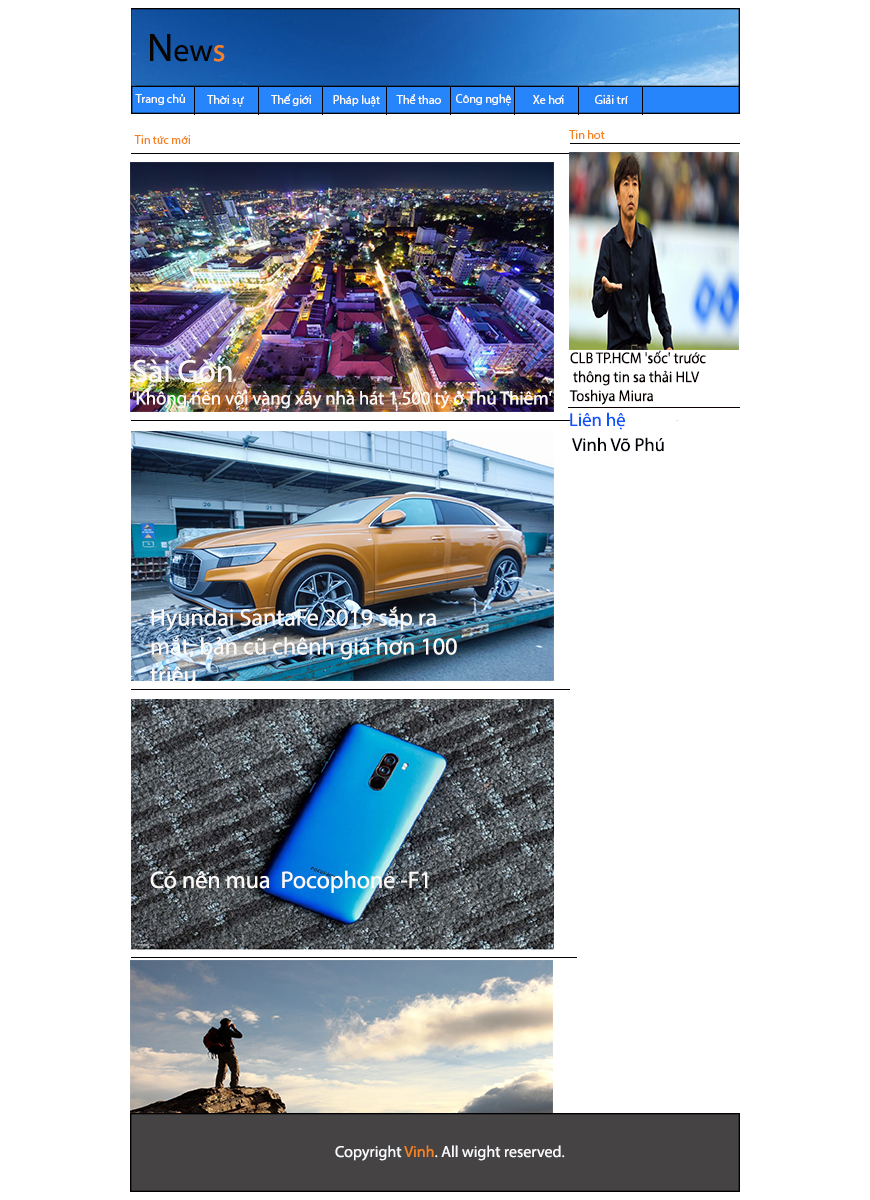
<style>
.page{position:relative;width:870px;height:1200px;background:#ffffff}
.page>*{position:absolute;margin:0}
.t1{font:32px "MyriadPro-Regular";color:#080400}
.t2{font:40px "MyriadPro-Regular";color:#080400}
.t3{font:32px "MyriadPro-Regular";color:#f58220}
.t4{font:12px "MyriadPro-Regular";color:#f9f8f8}
.t5{font:12px "MyriadPro-Regular";color:#f58220}
.t6{font:15.8px "MyriadPro-Regular";color:#0a0000;scale:0.93 1}
.t7{font:18.7px "MyriadPro-Regular";color:#fbf8f6}
.t8{font:32.1px "MyriadPro-Regular";color:#fbf8f6}
.t9{font:18.7px "MyriadPro-Regular";color:#0d55fa}
.t10{font:18.7px "MyriadPro-Regular";color:#00030a}
.t11{font:24px "MyriadPro-Regular";color:#fbf8f6}
.t12{font:16px "MyriadPro-Regular";color:#f9fafd}
.t13{font:16px "MyriadPro-Regular";color:#f58220}
</style>
<div class="page">
<p class="t1" style="left:150px;top:34px;width:75px;height:28px"><span class="t2">N</span>ew<span class="t3">s</span></p>
<p class="t4" style="left:135px;top:94px;width:50px;height:11px">Trang chủ</p>
<p class="t4" style="left:207px;top:95px;width:37px;height:12px">Thời sự</p>
<p class="t4" style="left:271px;top:94px;width:40px;height:12px">Thế giới</p>
<p class="t4" style="left:333px;top:95px;width:47px;height:12px">Pháp luật</p>
<p class="t4" style="left:396px;top:94px;width:45px;height:10px">Thể thao</p>
<p class="t4" style="left:456px;top:94px;width:55px;height:12px">Công nghệ</p>
<p class="t4" style="left:533px;top:95px;width:31px;height:9px">Xe hơi</p>
<p class="t4" style="left:595px;top:95px;width:33px;height:9px">Giải trí</p>
<p class="t5" style="left:134px;top:135px;width:56px;height:9px">Tin tức mới</p>
<p class="t5" style="left:569px;top:130px;width:36px;height:9px">Tin hot</p>
<p class="t6" style="left:569px;top:350px;width:137px;height:55px">CLB TP.HCM 'sốc' trước<br> thông tin sa thải HLV <br>Toshiya Miura</p>
<p class="t7" style="left:132px;top:359px;width:420px;height:50px"><span class="t8">Sài Gòn<br></span>'Không nên vội vàng xây nhà hát 1.500 tỷ ở Thủ Thiêm'</p>
<p class="t9" style="left:570px;top:412px;width:55px;height:18px">Liên hệ</p>
<p class="t10" style="left:572px;top:437px;width:92px;height:15px">Vinh Võ Phú</p>
<p class="t11" style="left:150px;top:606px;width:307px;height:82px">Hyundai SantaFe 2019 sắp ra<br>mắt, bản cũ chênh giá hơn 100 <br>triệu</p>
<p class="t11" style="left:150px;top:870px;width:278px;height:23px">Có nên mua  Pocophone -F1</p>
<p class="t12" style="left:335px;top:1145px;width:230px;height:16px">Copyright <span class="t13">Vinh</span>. All wight reserved.</p>
</div>
